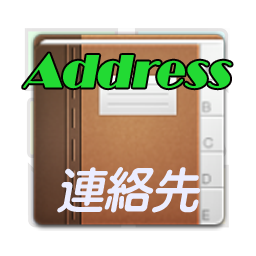
<style>
.page{position:relative;width:256px;height:256px;background:#ffffff}
.page>*{position:absolute;margin:0}
.t1{font:48px "Broadway";color:#22da33;font-weight:bold;font-style:italic}
.t2{font:48px "YentiEGP-Extra-SJIS";color:#eaecff;font-style:italic}
</style>
<div class="page">
<p class="t1" style="left:23px;top:53px;width:209px;height:36px">Address</p>
<p class="t2" style="left:57px;top:167px;width:144px;height:46px">連絡先</p>
</div>
